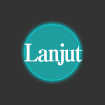
<style>
.page{position:relative;width:105px;height:105px;background:#333333}
.page>*{position:absolute;margin:0}
.t1{font:24px "RyuminPro-ExBold";letter-spacing:-0.08em;color:#fefefe;scale:0.9 1}
</style>
<div class="page">
<p class="t1" style="left:24px;top:43px;width:58px;height:23px">Lanjut</p>
</div>
